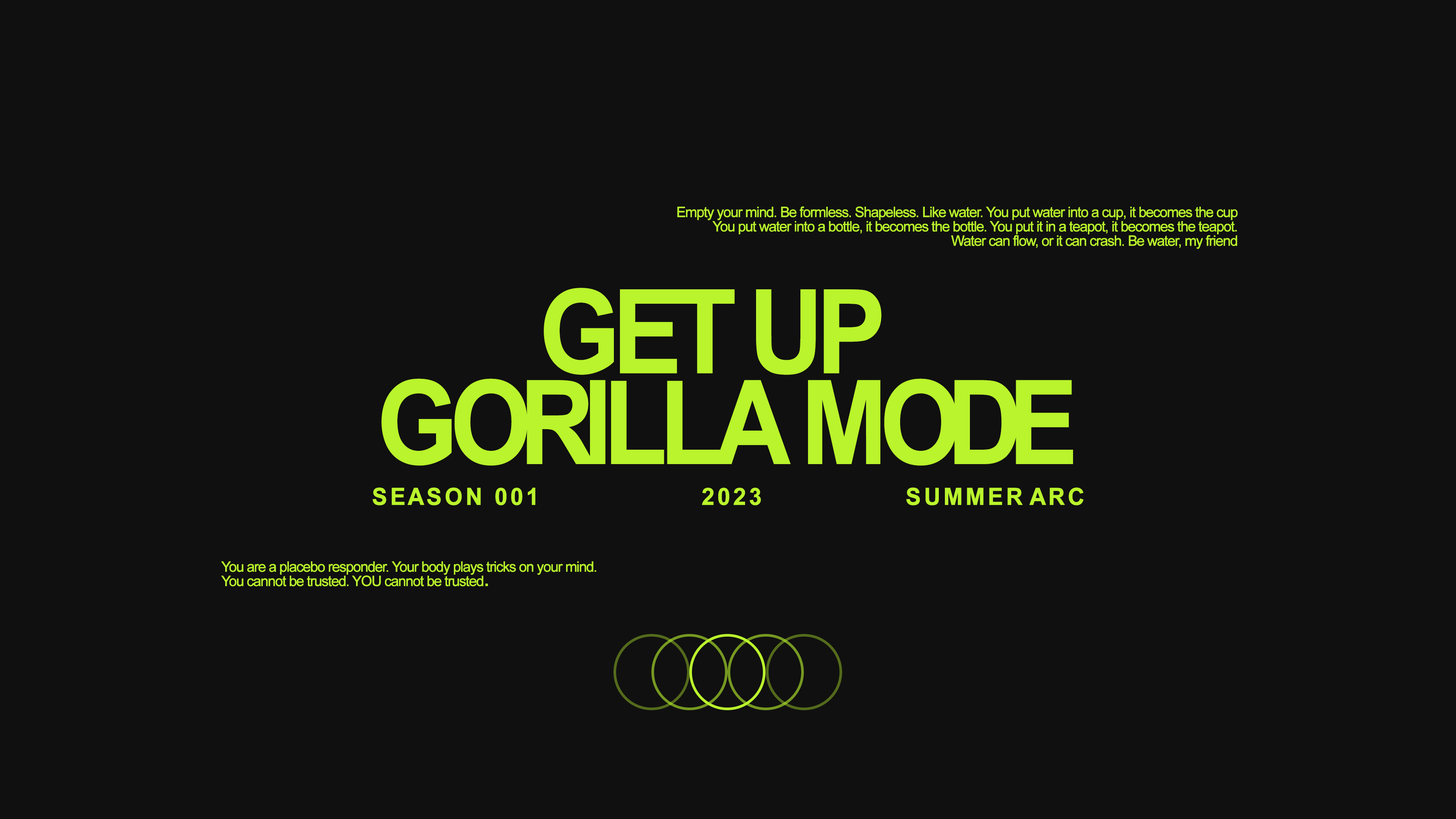
<style>
.page{position:relative;width:1456px;height:819px;background:#101010}
.page>*{position:absolute;margin:0}
.t1{font:14.3px/14.3px "ArialMT";letter-spacing:-0.075em;color:#baf42c;font-weight:bold}
.t2{font:116.9px/90.8px "Arial-BoldMT";letter-spacing:-0.1em;color:#baf42c;font-weight:bold;scale:0.89 1}
.t3{font:116.9px/90.8px "Arial-BoldMT";letter-spacing:-0.115em;color:#baf42c;font-weight:bold;scale:0.89 1}
.t4{font:116.9px/90.8px "Arial-BoldMT";letter-spacing:-0.14em;color:#baf42c;font-weight:bold;scale:0.89 1}
.t5{font:116.9px/90.8px "Arial-BoldMT";letter-spacing:-0.11em;color:#baf42c;font-weight:bold;scale:0.89 1}
.t6{font:116.9px/90.8px "Arial-BoldMT";letter-spacing:-0.16em;color:#baf42c;font-weight:bold;scale:0.89 1}
.t7{font:23.5px "Arial-BoldMT";letter-spacing:-0.1em;color:#baf42c;font-weight:bold}
.t8{font:22.9px/14.3px "ArialMT";letter-spacing:-0.075em;color:#baf42c;font-weight:bold}
</style>
<div class="page">
<p class="t1" style="left:677px;top:206px;width:561px;height:43px;text-align:right">Empty your mind. Be formless. Shapeless. Like water. You put water into a cup, it becomes the cup<br>You put water into a bottle, it becomes the bottle. You put it in a teapot, it becomes the teapot.<br> Water can flow, or it can crash. Be water, my friend</p>
<p class="t2" style="left:381px;top:288px;width:692px;height:178px;text-align:center">G<span class="t3">ET</span> UP <br>G<span class="t4">OR</span><span class="t5">I</span>LLA M<span class="t6">ODE</span></p>
<p class="t7" style="left:372px;top:487px;width:712px;height:18px">S E A S O N   0 0 1                                   2 0 2 3                               S U M M E R  A R C</p>
<p class="t1" style="left:221px;top:561px;width:375px;height:26px">You are a placebo responder. Your body plays tricks on your mind. <br>You cannot be trusted. YOU cannot be trusted<span class="t8">.</span></p>
</div>
